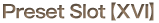
<style>
.page{position:relative;width:159px;height:23px;background:#ffffff}
.page>*{position:absolute;margin:0}
.t1{font:18px "GothicMB101Pro-DeBold";letter-spacing:-0.04em}
.t2{font:18px "GothicMB101Pro-DeBold";letter-spacing:-0.04em;color:#8b6e51}
</style>
<div class="page">
<p class="t1" style="left:3px;top:2px;width:151px;height:19px">Preset Slot【      】</p>
<p class="t2" style="left:116px;top:4px;width:33px;height:15px;opacity:0.9">XVI</p>
</div>
